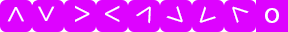
<style>
.page{position:relative;width:288px;height:32px;background:#dd03ff}
.page>*{position:absolute;margin:0}
.t1{font:12px "MyriadPro-Regular";color:#ffffff}
</style>
<div class="page">
<p class="t1" style="left:38px;top:6px;width:17px;height:15px;rotate:90deg">&gt;</p>
<p class="t1" style="left:75px;top:5px;width:15px;height:17px">&gt;</p>
<p class="t1" style="left:105px;top:5px;width:15px;height:17px">&lt;</p>
<p class="t1" style="left:136px;top:6px;width:15px;height:18px;rotate:-60deg">&gt;</p>
<p class="t1" style="left:166px;top:6px;width:17px;height:17px;rotate:45deg">&gt;</p>
<p class="t1" style="left:199px;top:6px;width:17px;height:17px;rotate:135deg">&gt;</p>
<p class="t1" style="left:232px;top:6px;width:17px;height:17px;rotate:-135deg">&gt;</p>
<p class="t1" style="left:7px;top:7px;width:17px;height:15px;rotate:-90deg">&gt;</p>
<p class="t1" style="left:265px;top:8px;width:14px;height:15px">o</p>
</div>
